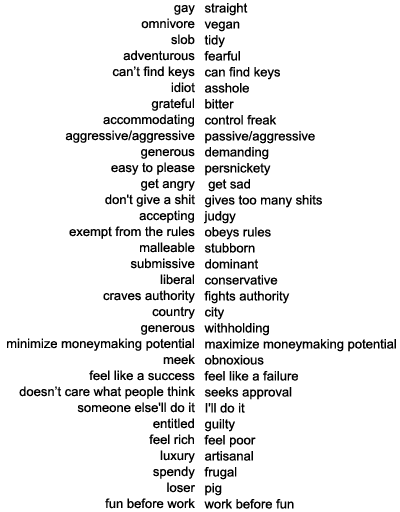
<style>
.page{position:relative;width:400px;height:512px;background:#ffffff}
.page>*{position:absolute;margin:0}
.t1{font:13px/16px "ArialMT";color:#000000}
</style>
<div class="page">
<p class="t1" style="left:7px;top:5px;width:188px;height:504px;text-align:right">gay<br>omnivore<br>slob<br>adventurous<br>can’t find keys<br>idiot<br>grateful<br>accommodating<br>aggressive/aggressive<br>generous<br>easy to please<br>get angry<br>don't give a shit<br>accepting<br>exempt from the rules<br>malleable<br>submissive<br>liberal<br>craves authority<br>country<br>generous<br>minimize moneymaking potential<br>meek<br>feel like a success<br>doesn’t care what people think<br>someone else'll do it<br>entitled<br>feel rich<br>luxury<br>spendy<br>loser<br>fun before work</p>
<p class="t1" style="left:203px;top:3px;width:193px;height:506px">straight<br>vegan<br>tidy<br>fearful<br>can find keys<br>asshole<br>bitter<br>control freak<br>passive/aggressive<br>demanding<br>persnickety<br> get sad<br>gives too many shits<br>judgy<br>obeys rules<br>stubborn<br>dominant<br>conservative<br>fights authority<br>city<br>withholding<br>maximize moneymaking potential<br>obnoxious<br>feel like a failure<br>seeks approval<br>I'll do it<br>guilty<br>feel poor<br>artisanal<br>frugal<br>pig<br>work before fun</p>
</div>
